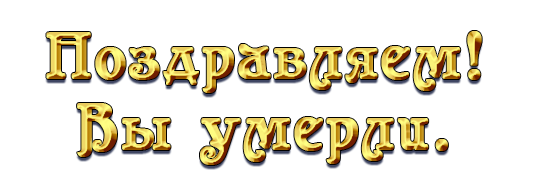
<style>
.page{position:relative;width:533px;height:188px;background:#ffffff}
.page>*{position:absolute;margin:0}
.t1{font:65.2px "Casanova";letter-spacing:0.03em;font-weight:bold}
</style>
<div class="page">
<p class="t1" style="left:46px;top:31px;width:436px;height:62px">Поздравляем!</p>
<p class="t1" style="left:77px;top:103px;width:371px;height:62px">Вы умерли.</p>
</div>
